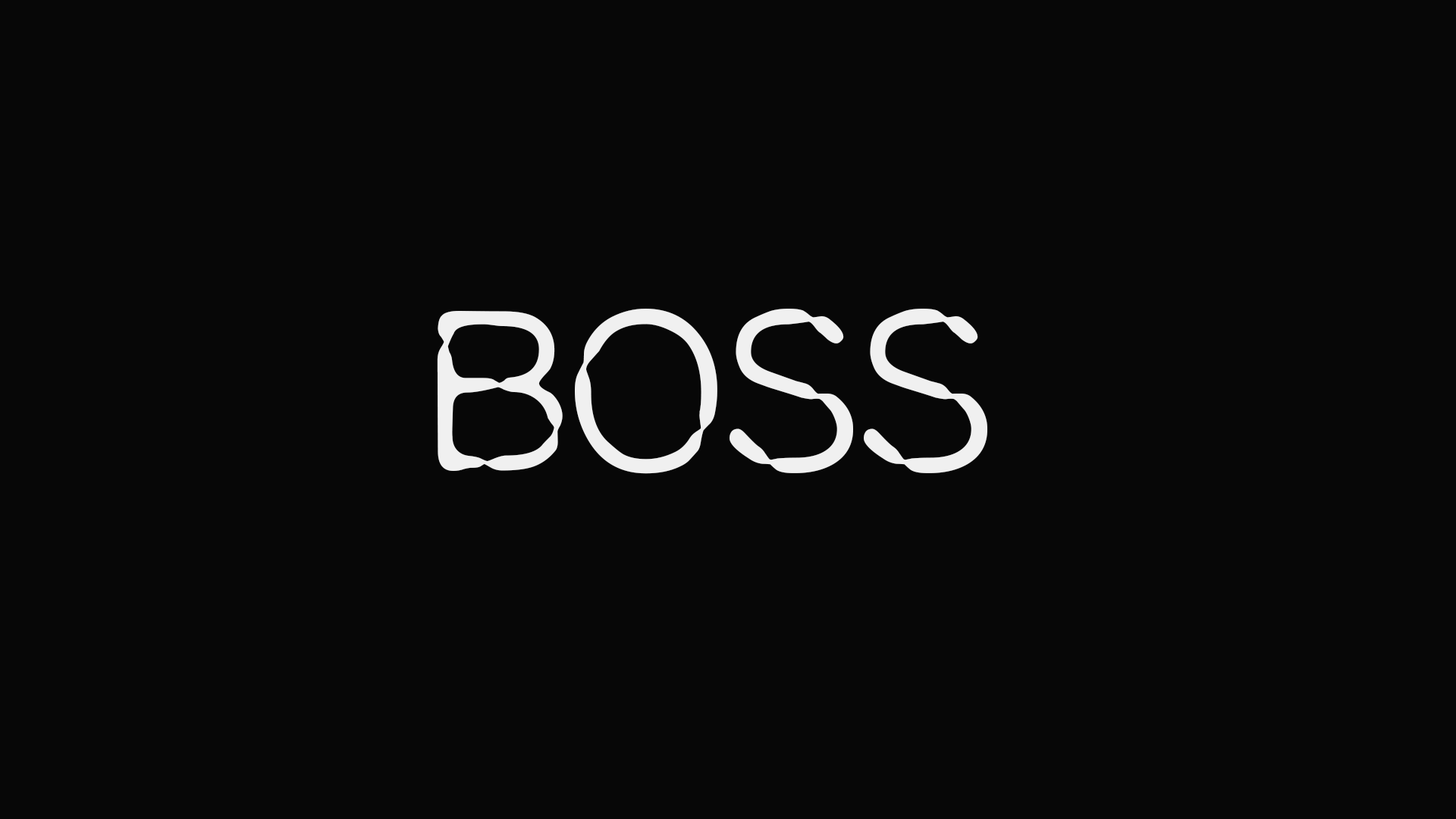
<style>
.page{position:relative;width:1456px;height:819px;background:#070707}
.page>*{position:absolute;margin:0}
.t1{font:227.5px "DFKoIn-W4-WING-RKSJ-H";color:#f0f0f0}
</style>
<div class="page">
<p class="t1" style="left:437px;top:309px;width:550px;height:165px">BOSS</p>
</div>
